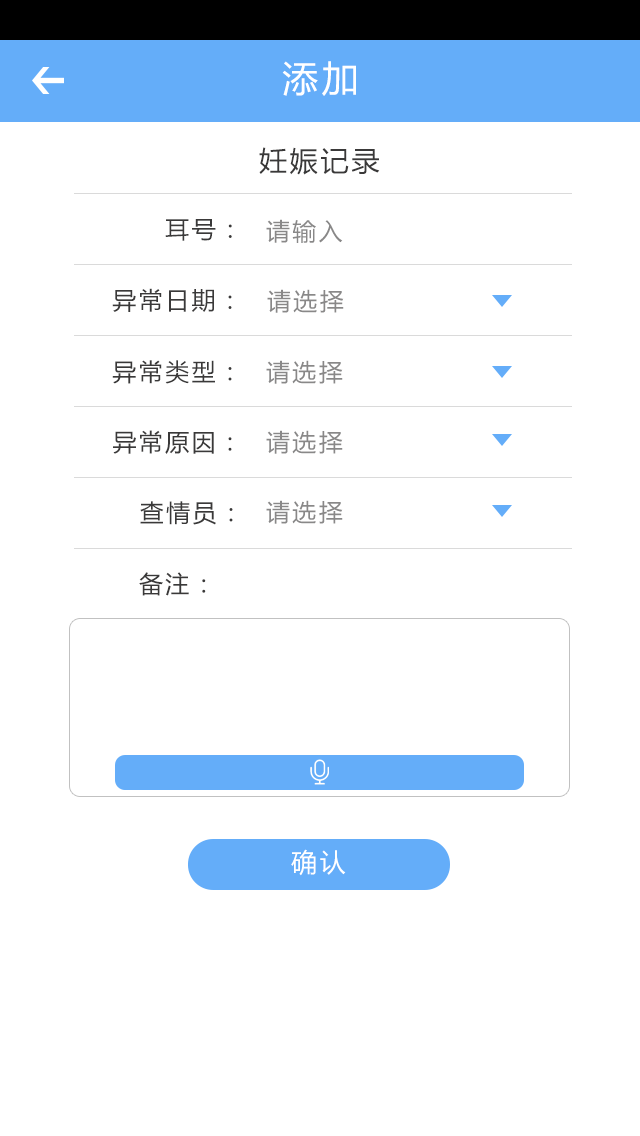
<style>
.page{position:relative;width:640px;height:1136px;background:#ffffff}
.page>*{position:absolute;margin:0}
.t1{font:36px "MicrosoftYaHei";letter-spacing:0.1em;color:#ffffff}
.t2{font:28px "MicrosoftYaHei";letter-spacing:0.1em;color:#3a3939}
.t3{font:24px "MicrosoftYaHei";letter-spacing:0.1em;color:#3a3939}
.t4{font:24px "MicrosoftYaHei";letter-spacing:0.1em;color:#898888}
.t5{font:26px "MicrosoftYaHei";letter-spacing:0.1em;color:#ffffff}
</style>
<div class="page">
<p class="t1" style="left:282px;top:61px;width:74px;height:35px">添加</p>
<p class="t2" style="left:259px;top:147px;width:121px;height:28px">妊娠记录</p>
<p class="t3" style="left:165px;top:219px;width:67px;height:22px">耳号：</p>
<p class="t4" style="left:266px;top:219px;width:77px;height:24px">请输入</p>
<p class="t3" style="left:112px;top:288px;width:120px;height:24px">异常日期：</p>
<p class="t4" style="left:267px;top:289px;width:77px;height:24px">请选择</p>
<p class="t3" style="left:112px;top:360px;width:120px;height:24px">异常类型：</p>
<p class="t4" style="left:266px;top:360px;width:77px;height:24px">请选择</p>
<p class="t3" style="left:113px;top:430px;width:119px;height:24px">异常原因：</p>
<p class="t4" style="left:266px;top:430px;width:77px;height:24px">请选择</p>
<p class="t3" style="left:140px;top:501px;width:93px;height:24px">查情员：</p>
<p class="t4" style="left:266px;top:500px;width:77px;height:24px">请选择</p>
<p class="t3" style="left:139px;top:572px;width:67px;height:24px">备注：</p>
<p class="t5" style="left:291px;top:849px;width:55px;height:27px">确认</p>
</div>
